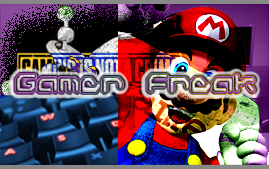
<style>
.page{position:relative;width:269px;height:169px}
.page>*{position:absolute;margin:0}
.t1{font:24px "GameboyGamegirl"}
</style>
<div class="page">
<p class="t1" style="left:13px;top:73px;width:243px;height:21px">Gamer Freak</p>
</div>
